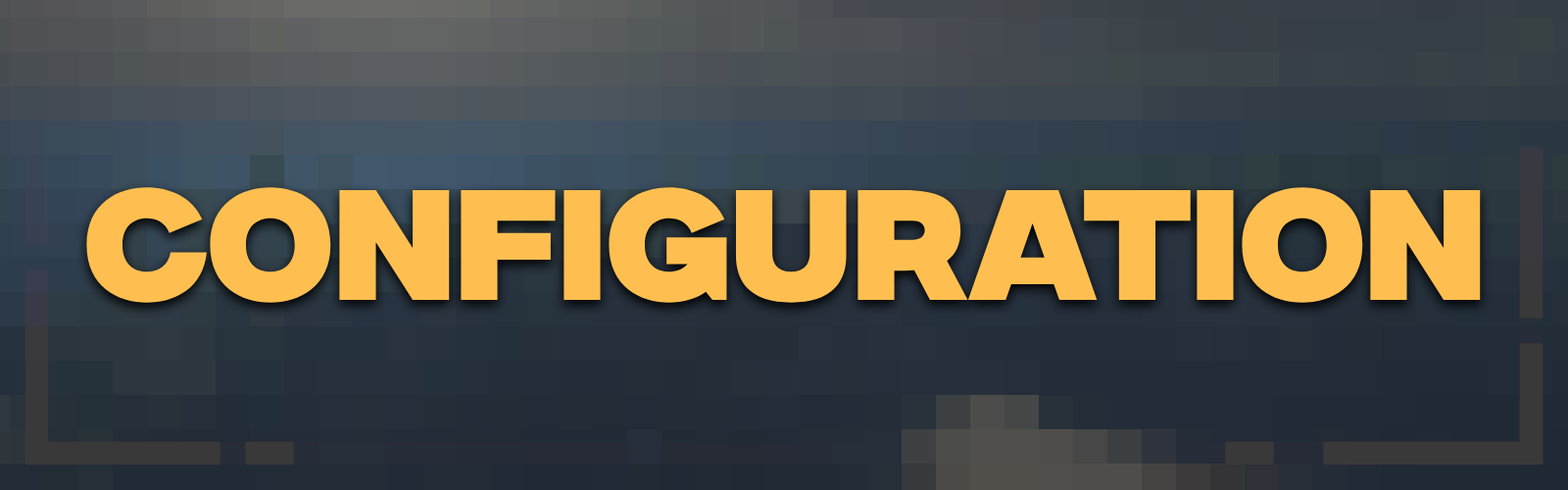
<style>
.page{position:relative;width:1568px;height:490px}
.page>*{position:absolute;margin:0}
.t1{font:156.8px "MilkerRegular";color:#ffbf50}
</style>
<div class="page">
<p class="t1" style="left:86px;top:187px;width:1395px;height:116px">CONFIGURATION</p>
</div>
